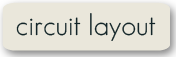
<style>
.page{position:relative;width:176px;height:57px;background:#eae7db}
.page>*{position:absolute;margin:0}
.t1{font:29.2px "GeosansLight";color:#132528}
</style>
<div class="page">
<p class="t1" style="left:16px;top:13px;width:140px;height:28px">circuit layout</p>
</div>
